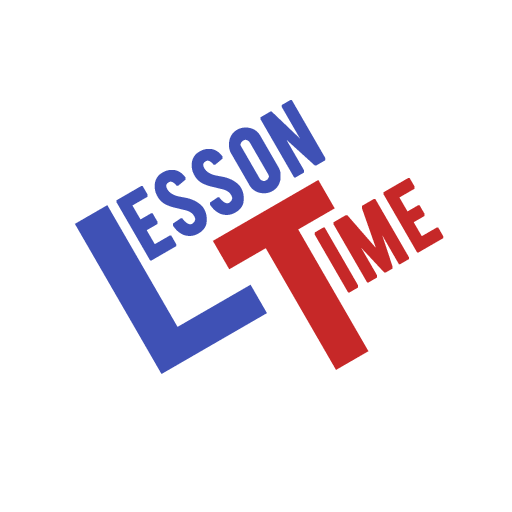
<style>
.page{position:relative;width:512px;height:512px;background:#ffffff}
.page>*{position:absolute;margin:0}
.t1{font:75px "Bebas";color:#3f51b5;font-weight:bold}
.t2{font:299.9px "8514oem";letter-spacing:-0.1em;color:#3f51b5;font-weight:bold}
.t3{font:299.9px "8514oem";letter-spacing:-0.1em;color:#c62828;font-weight:bold}
.t4{font:75px "Bebas";letter-spacing:0.01em;color:#c62828;font-weight:bold}
</style>
<div class="page">
<p class="t1" style="left:116px;top:100px;width:210px;height:161px;rotate:-30deg">esson</p>
<p class="t2" style="left:74px;top:180px;width:295px;height:194px;rotate:-30deg">L<span class="t3">T</span></p>
<p class="t4" style="left:314px;top:178px;width:130px;height:115px;rotate:-30deg">ime</p>
</div>
